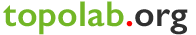
<style>
.page{position:relative;width:196px;height:35px;background:#ffffff}
.page>*{position:absolute;margin:0}
.t1{font:36px "GillSans-SemiBold";letter-spacing:0.005em;color:#72b626}
.t2{font:36px "GillSans-SemiBold";letter-spacing:0.005em;color:#ff0000}
.t3{font:36px "GillSans-SemiBold";letter-spacing:0.005em;color:#303030}
</style>
<div class="page">
<p class="t1" style="left:3px;top:1px;width:185px;height:34px">topolab<span class="t2">.</span><span class="t3">org</span></p>
</div>
